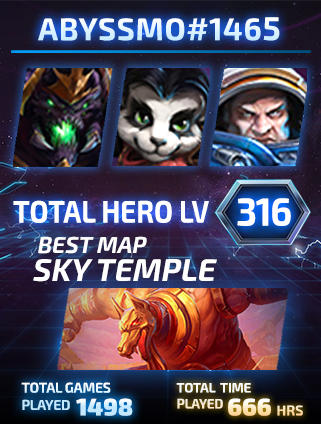
<style>
.page{position:relative;width:321px;height:424px}
.page>*{position:absolute;margin:0}
.t1{font:31.2px "Exo2-Bold";letter-spacing:0.02em}
.t2{font:33.1px "Exo2-Bold";letter-spacing:0.02em}
.t3{font:39.6px "Exo2-Bold";letter-spacing:-0.04em;color:#ffffff;scale:0.94 1}
.t4{font:31.7px "Exo2-Bold";color:#ffffff;scale:0.87 1}
.t5{font:31.6px/28px "Exo2-Bold";color:#ffffff;font-style:italic}
.t6{font:22.9px/32px "Exo2-Bold";color:#ffffff;font-style:italic}
.t7{font:14.2px "Exo2-Bold";letter-spacing:-0.02em}
.t8{font:13.4px "Exo2-Bold";letter-spacing:-0.02em;color:#ffffff}
.t9{font:24.2px "Exo2-Black"}
.t10{font:14.1px "Exo2-Bold"}
</style>
<div class="page">
<p class="t1" style="left:38px;top:17px;width:242px;height:24px">ABYSSMO#146<span class="t2">5</span></p>
<p class="t3" style="left:237px;top:198px;width:54px;height:28px">316</p>
<p class="t4" style="left:13px;top:200px;width:196px;height:23px">TOTAL HERO LV</p>
<p class="t5" style="left:33px;top:236px;width:184px;height:46px"><span class="t6"> BEST MAP<br></span>SKY TEMPLE</p>
<p class="t7" style="left:21px;top:382px;width:90px;height:28px">TOTAL GAMES <br>PLAYED</p>
<p class="t8" style="left:176px;top:382px;width:75px;height:27px">TOTAL  TIME <br>PLAYED</p>
<p class="t9" style="left:76px;top:398px;width:57px;height:18px">1498</p>
<p class="t9" style="left:228px;top:398px;width:75px;height:18px">666 <span class="t10">HRS</span></p>
</div>
